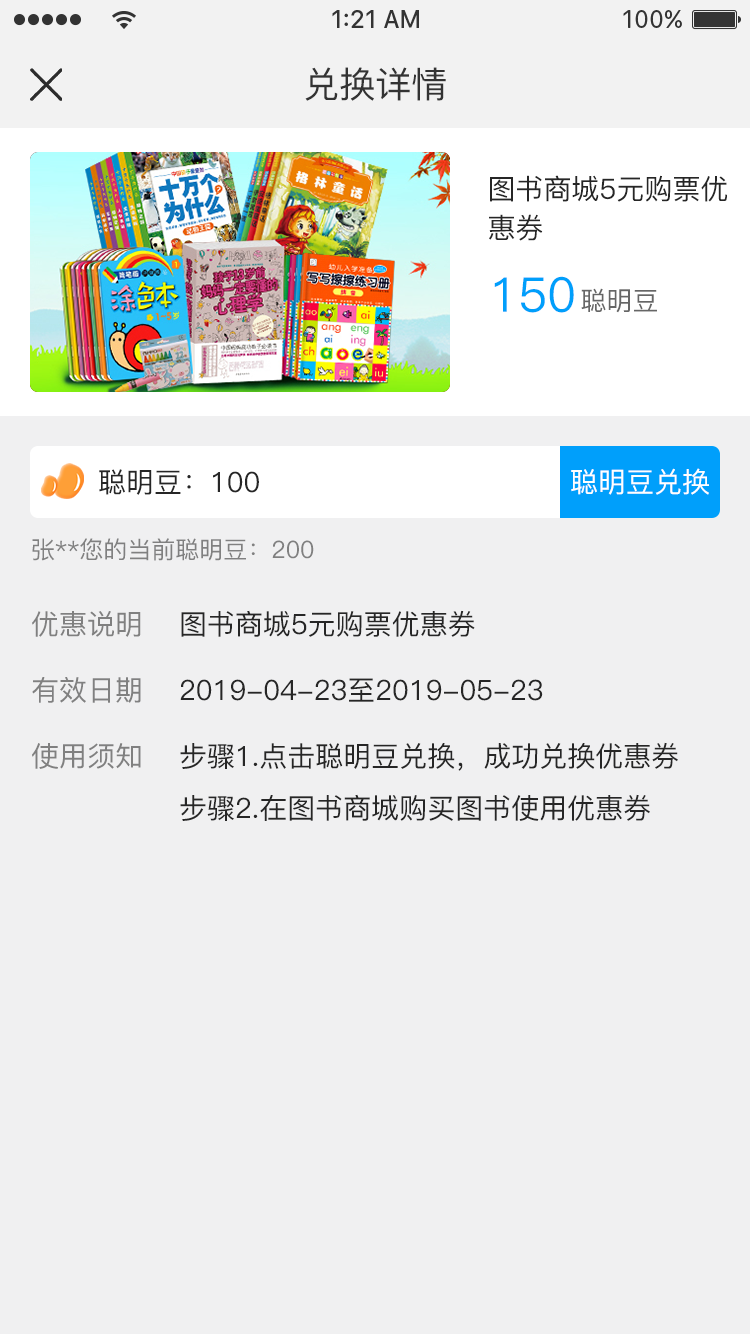
<style>
.page{position:relative;width:750px;height:1334px;background:#f0f0f1}
.page>*{position:absolute;margin:0}
.t1{font:36px "PingFang-SC-Medium";color:#333333}
.t2{font:28px/39px "PingFang-SC-Medium";color:#262626}
.t3{font:48px "PingFang-SC-Medium";color:#009ffb}
.t4{font:26px "PingFang-SC-Medium";color:#666666}
.t5{font:28px "PingFang-SC-Medium";color:#262626}
.t6{font:28px "PingFang-SC-Medium";color:#ffffff}
.t7{font:24px "PingFang-SC-Medium";color:#808080}
.t8{font:28px "PingFang-SC-Medium";color:#808080}
</style>
<div class="page">
<p class="t1" style="left:305px;top:67px;width:141px;height:34px">兑换详情</p>
<p class="t2" style="left:489px;top:175px;width:238px;height:66px">图书商城5元购票优<br>惠券</p>
<p class="t3" style="left:494px;top:276px;width:80px;height:37px">150</p>
<p class="t4" style="left:581px;top:288px;width:76px;height:25px">聪明豆</p>
<p class="t5" style="left:99px;top:469px;width:160px;height:26px">聪明豆：100</p>
<p class="t6" style="left:571px;top:468px;width:138px;height:27px">聪明豆兑换</p>
<p class="t7" style="left:32px;top:538px;width:282px;height:23px">张**您的当前聪明豆：200</p>
<p class="t8" style="left:32px;top:611px;width:109px;height:26px">优惠说明</p>
<p class="t5" style="left:181px;top:610px;width:294px;height:27px">图书商城5元购票优惠券</p>
<p class="t8" style="left:32px;top:677px;width:109px;height:26px">有效日期</p>
<p class="t5" style="left:180px;top:678px;width:363px;height:24px">2019-04-23至2019-05-23</p>
<p class="t8" style="left:32px;top:743px;width:109px;height:26px">使用须知</p>
<p class="t5" style="left:180px;top:742px;width:498px;height:29px">步骤1.点击聪明豆兑换，成功兑换优惠券</p>
<p class="t5" style="left:180px;top:794px;width:470px;height:27px">步骤2.在图书商城购买图书使用优惠券</p>
</div>
